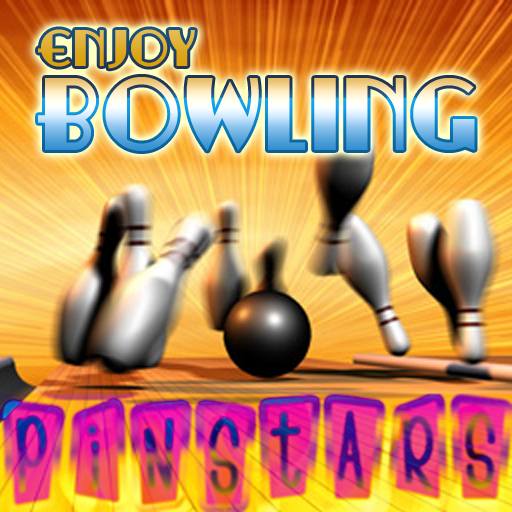
<style>
.page{position:relative;width:512px;height:512px}
.page>*{position:absolute;margin:0}
.t1{font:96px/84px "RitzyRemix";letter-spacing:0.05em}
.t2{font:48px/84px "RitzyRemix";letter-spacing:0.05em}
</style>
<div class="page">
<p class="t1" style="left:38px;top:29px;width:437px;height:122px"><span class="t2">ENJOY<br></span>BOWLING</p>
</div>
